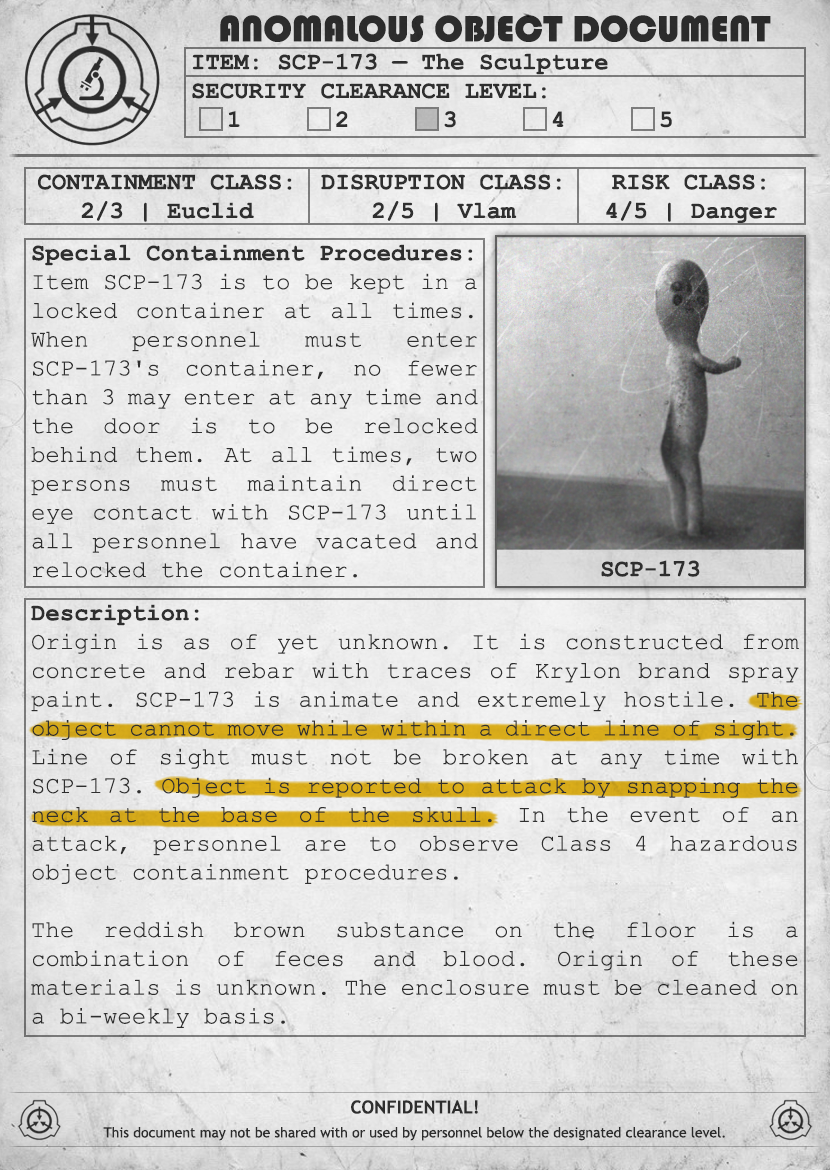
<style>
.page{position:relative;width:830px;height:1170px}
.page>*{position:absolute;margin:0}
.t1{font:38px "Bauhaus93";color:#333333;text-transform:uppercase}
.t2{font:24px "CourierNewPS-BoldMT";color:#333333}
.t3{font:24px "CourierNewPSMT";color:#333333}
.t4{font:14px/24px "TrebuchetMS";color:#333333}
.t5{font:18px/24px "TrebuchetMS-Bold";color:#333333}
</style>
<div class="page">
<p class="t1" style="left:220px;top:15px;width:551px;height:27px">anomalous object document</p>
<p class="t2" style="left:192px;top:53px;width:480px;height:75px">ITEM: SCP-173 — The Sculpture<br>SECURITY CLEARANCE LEVEL: <br> 1   2   3   4   5</p>
<p class="t2" style="left:38px;top:174px;width:254px;height:48px;text-align:center">CONTAINMENT CLASS:<br>2/3 | Euclid</p>
<p class="t2" style="left:321px;top:174px;width:240px;height:48px;text-align:center">DISRUPTION CLASS:<br>2/5 | Vlam</p>
<p class="t2" style="left:606px;top:174px;width:171px;height:50px;text-align:center">RISK CLASS:<br>4/5 | Danger</p>
<p class="t3" style="left:31px;top:244px;width:447px;height:334px;text-align:justify"><span class="t2">Special Containment Procedures:<br></span>Item SCP-173 is to be kept in a locked container at all times. When personnel must enter SCP-173's container, no fewer than 3 may enter at any time and the door is to be relocked behind them. At all times, two persons must maintain direct eye contact with SCP-173 until all personnel have vacated and relocked the container.</p>
<p class="t2" style="left:601px;top:560px;width:99px;height:17px">SCP-173</p>
<p class="t3" style="left:31px;top:604px;width:768px;height:424px;text-align:justify"><span class="t2">Description:<br></span>Origin is as of yet unknown. It is constructed from concrete and rebar with traces of Krylon brand spray paint. SCP-173 is animate and extremely hostile. The object cannot move while within a direct line of sight. Line of sight must not be broken at any time with SCP-173. Object is reported to attack by snapping the neck at the base of the skull. In the event of an attack, personnel are to observe Class 4 hazardous object containment procedures.<br><br>The reddish brown substance on the floor is a combination of feces and blood. Origin of these materials is unknown. The enclosure must be cleaned on a bi-weekly basis.</p>
<p class="t4" style="left:103px;top:1100px;width:622px;height:41px;text-align:center"><span class="t5">CONFIDENTIAL!<br></span>This document may not be shared with or used by personnel below the designated clearance level.</p>
</div>
